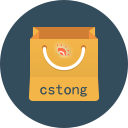
<style>
.page{position:relative;width:128px;height:128px;background:#334d5c}
.page>*{position:absolute;margin:0}
.t1{font:16px "SimHei";color:#334d5c}
</style>
<div class="page">
<p class="t1" style="left:40px;top:84px;width:47px;height:13px">cstong</p>
</div>
